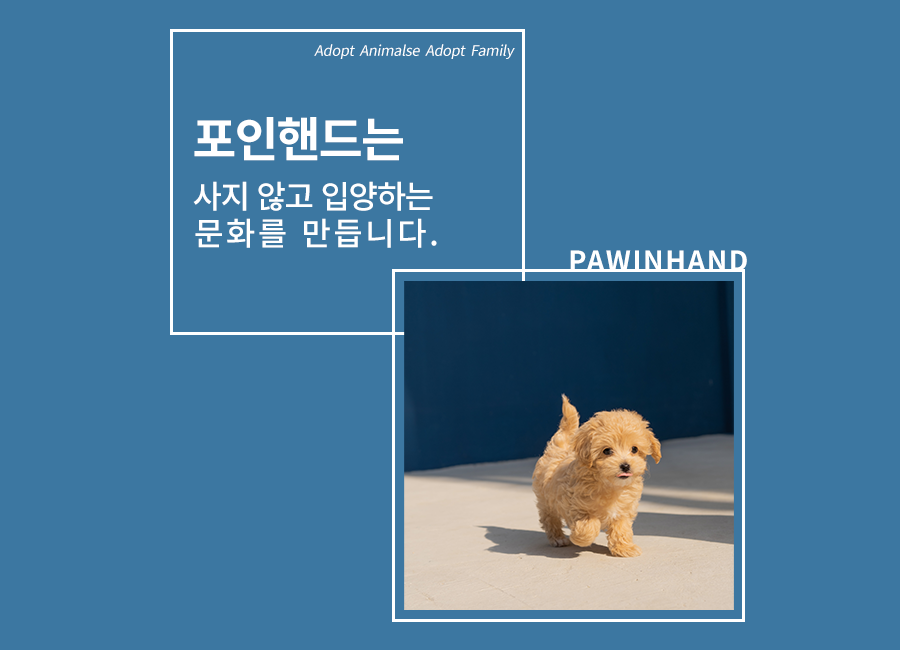
<style>
.page{position:relative;width:900px;height:650px;background:#3c77a1}
.page>*{position:absolute;margin:0}
.t1{font:14.5px "NotoSansKR-Regular";letter-spacing:-0.02em;color:#ffffff;font-style:italic}
.t2{font:48px "NotoSansKR-Bold";letter-spacing:-0.04em;color:#ffffff}
.t3{font:32px/37px "NotoSansKR-Medium";letter-spacing:-0.04em;color:#ffffff}
.t4{font:32px/37px "NotoSansKR-Medium";letter-spacing:0.08em;color:#ffffff}
.t5{font:27.3px "NotoSansKR-Bold";letter-spacing:0.06em;color:#ffffff}
</style>
<div class="page">
<p class="t1" style="left:314px;top:44px;width:201px;height:15px">Adopt  Animalse  Adopt  Family</p>
<p class="t2" style="left:194px;top:117px;width:209px;height:44px">포인핸드는</p>
<p class="t3" style="left:193px;top:181px;width:244px;height:67px;text-align:center">사지 않고 입양하는 <br><span class="t4">문화를 만듭니다.</span></p>
<p class="t5" style="left:570px;top:250px;width:177px;height:21px">PAWINHAND</p>
</div>
